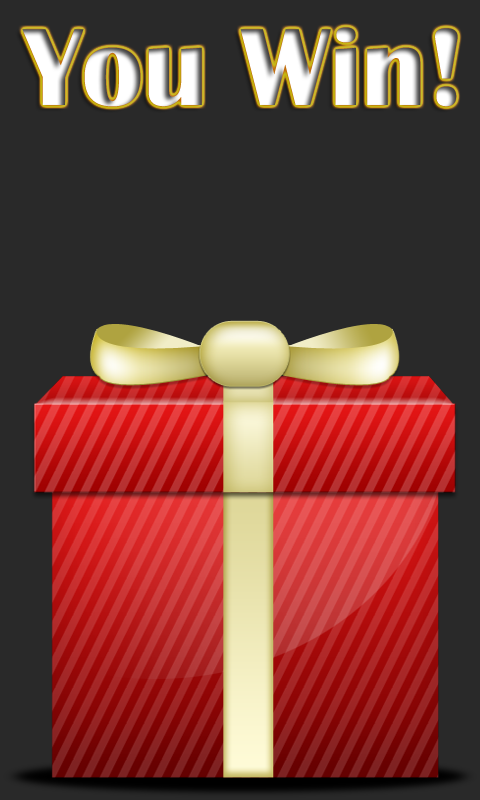
<style>
.page{position:relative;width:480px;height:800px;background:#292929}
.page>*{position:absolute;margin:0}
.t1{font:113.3px "BritannicBold";color:#ffffff}
</style>
<div class="page">
<p class="t1" style="left:22px;top:27px;width:436px;height:80px">You Win!</p>
</div>
